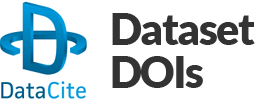
<style>
.page{position:relative;width:275px;height:100px;background:#ffffff}
.page>*{position:absolute;margin:0}
.t1{font:43.2px/43px "Lato-Black";letter-spacing:-0.04em;color:#333333}
</style>
<div class="page">
<p class="t1" style="left:112px;top:13px;width:143px;height:75px">Dataset <br>DOIs</p>
</div>
